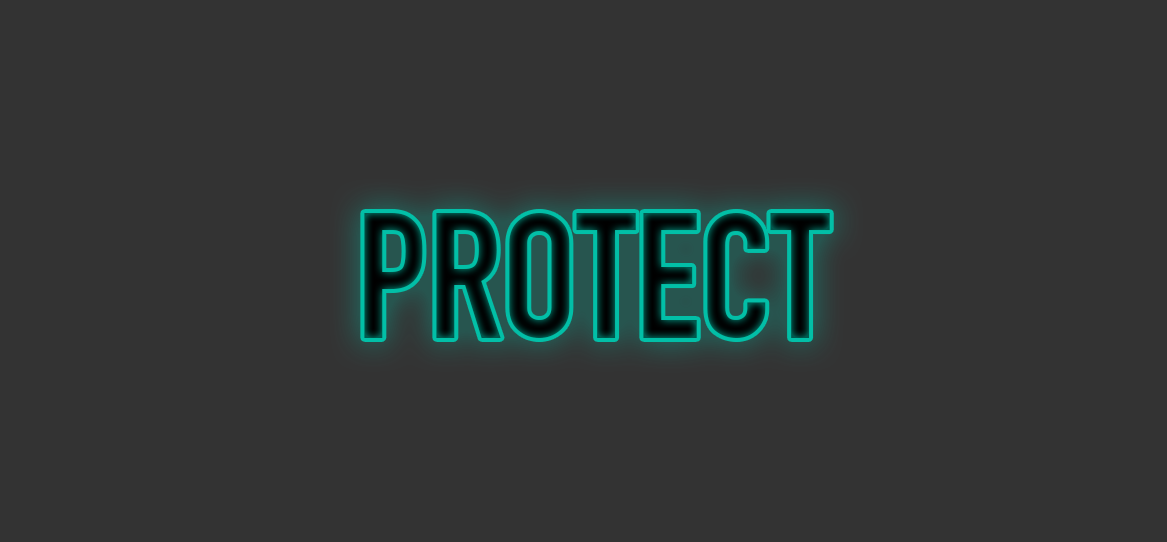
<style>
.page{position:relative;width:1167px;height:542px;background:#333333}
.page>*{position:absolute;margin:0}
.t1{font:175.4px "DINEngschrift";text-transform:uppercase}
</style>
<div class="page">
<p class="t1" style="left:364px;top:213px;width:466px;height:125px">protect</p>
</div>
